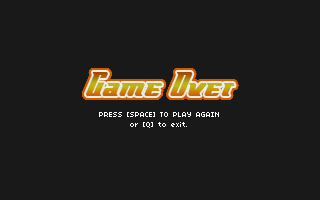
<style>
.page{position:relative;width:320px;height:200px;background:#191919}
.page>*{position:absolute;margin:0}
.t1{font:36px "FlyboyBB"}
.t2{font:8px "04b03";color:#ffffff}
</style>
<div class="page">
<p class="t1" style="left:86px;top:72px;width:149px;height:24px">Game Over</p>
<p class="t2" style="left:99px;top:112px;width:120px;height:16px;text-align:center">PRESS [SPACE] TO PLAY AGAIN<br>or [Q] to exit.</p>
</div>
